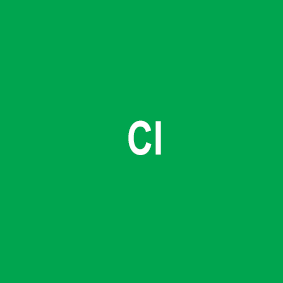
<style>
.page{position:relative;width:283px;height:283px;background:#00a54f}
.page>*{position:absolute;margin:0}
.t1{font:46.2px "Arial-BoldMT";color:#ffffff;scale:0.78 1}
</style>
<div class="page">
<p class="t1" style="left:128px;top:120px;width:33px;height:35px">Cl</p>
</div>
